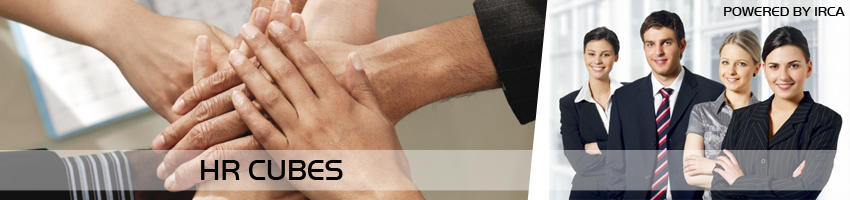
<style>
.page{position:relative;width:850px;height:200px}
.page>*{position:absolute;margin:0}
.t1{font:13.7px "HandelGotD-Ligh";color:#010000;text-transform:uppercase}
.t2{font:29.9px "HandelGotD-Ligh";color:#010000}
</style>
<div class="page">
<p class="t1" style="left:724px;top:7px;width:121px;height:9px">Powered by IRCA</p>
<p class="t2" style="left:201px;top:160px;width:142px;height:20px">HR CUBES</p>
</div>
